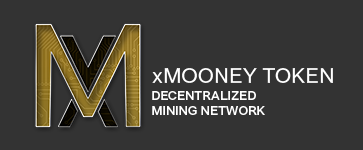
<style>
.page{position:relative;width:363px;height:150px;background:#333333}
.page>*{position:absolute;margin:0}
.t1{font:20.8px "VremenaGroteskBook";color:#ffffff}
.t2{font:12.5px "VremenaGrotesk";color:#ffffff}
</style>
<div class="page">
<p class="t1" style="left:152px;top:68px;width:181px;height:15px">xMOONEY TOKEN</p>
<p class="t2" style="left:152px;top:91px;width:113px;height:24px">DECENTRALIZED<br>MINING NETWORK</p>
</div>
